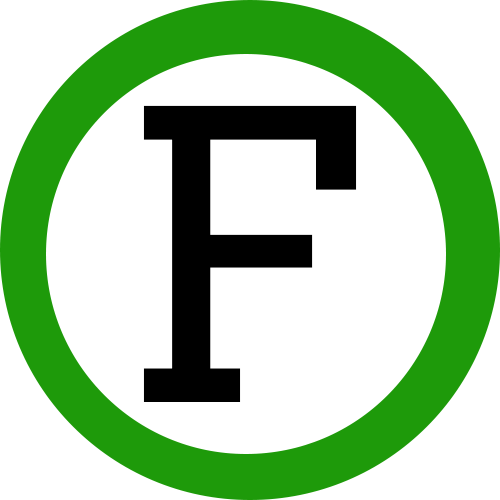
<style>
.page{position:relative;width:500px;height:500px;background:#ffffff}
.page>*{position:absolute;margin:0}
.t1{font:400px "Arvo";color:#000000}
</style>
<div class="page">
<p class="t1" style="left:143px;top:105px;width:214px;height:297px">F</p>
</div>
